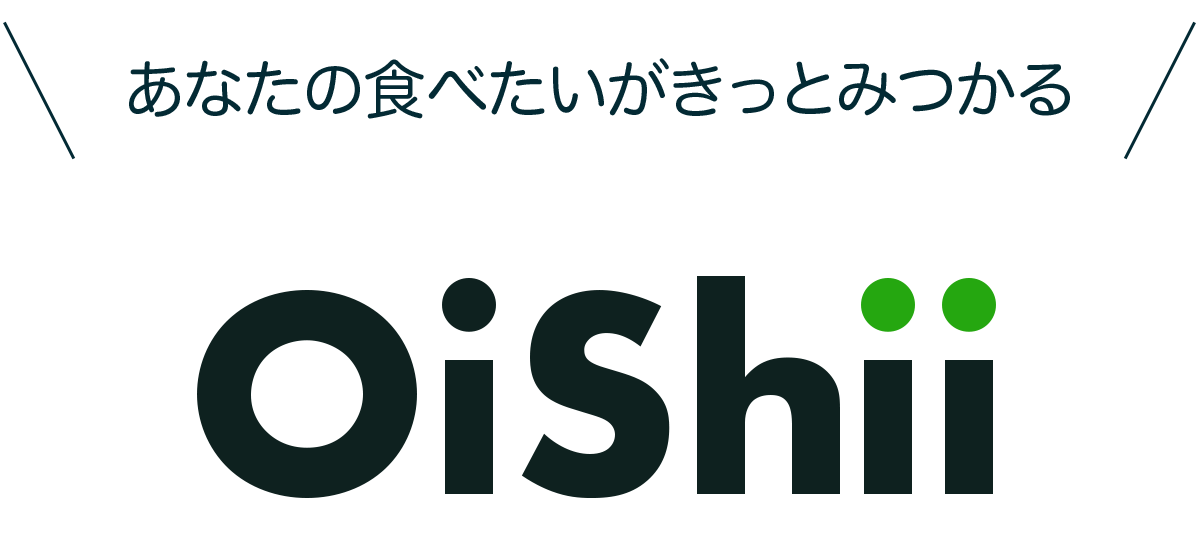
<style>
.page{position:relative;width:1200px;height:550px;background:#ffffff}
.page>*{position:absolute;margin:0}
.t1{font:62.9px "HiraMaruPro-W4";color:#032a34}
.t2{font:299.1px "FuturaPT-Bold";color:#0e211f}
</style>
<div class="page">
<p class="t1" style="left:129px;top:58px;width:941px;height:61px">あなたの食べたいがきっとみつかる</p>
<p class="t2" style="left:197px;top:276px;width:799px;height:222px">OiShii</p>
</div>
